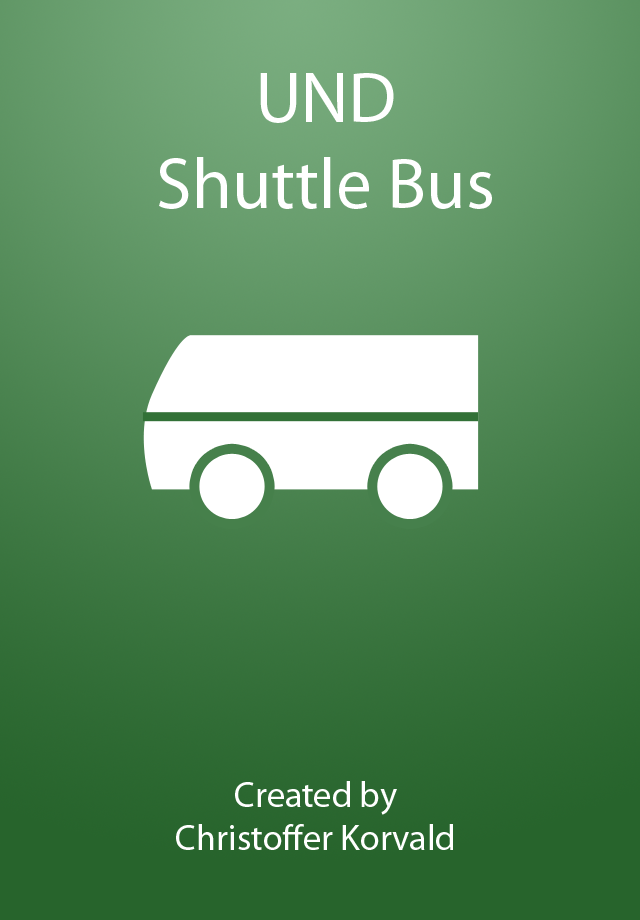
<style>
.page{position:relative;width:640px;height:920px}
.page>*{position:absolute;margin:0}
.t1{font:72px "MyriadPro-Regular";color:#ffffff}
.t2{font:36px "MyriadPro-Regular";color:#ffffff}
</style>
<div class="page">
<p class="t1" style="left:159px;top:73px;width:333px;height:136px;text-align:center">UND<br>Shuttle Bus</p>
<p class="t2" style="left:176px;top:781px;width:277px;height:69px;text-align:center">Created by<br>Christoffer Korvald</p>
</div>
